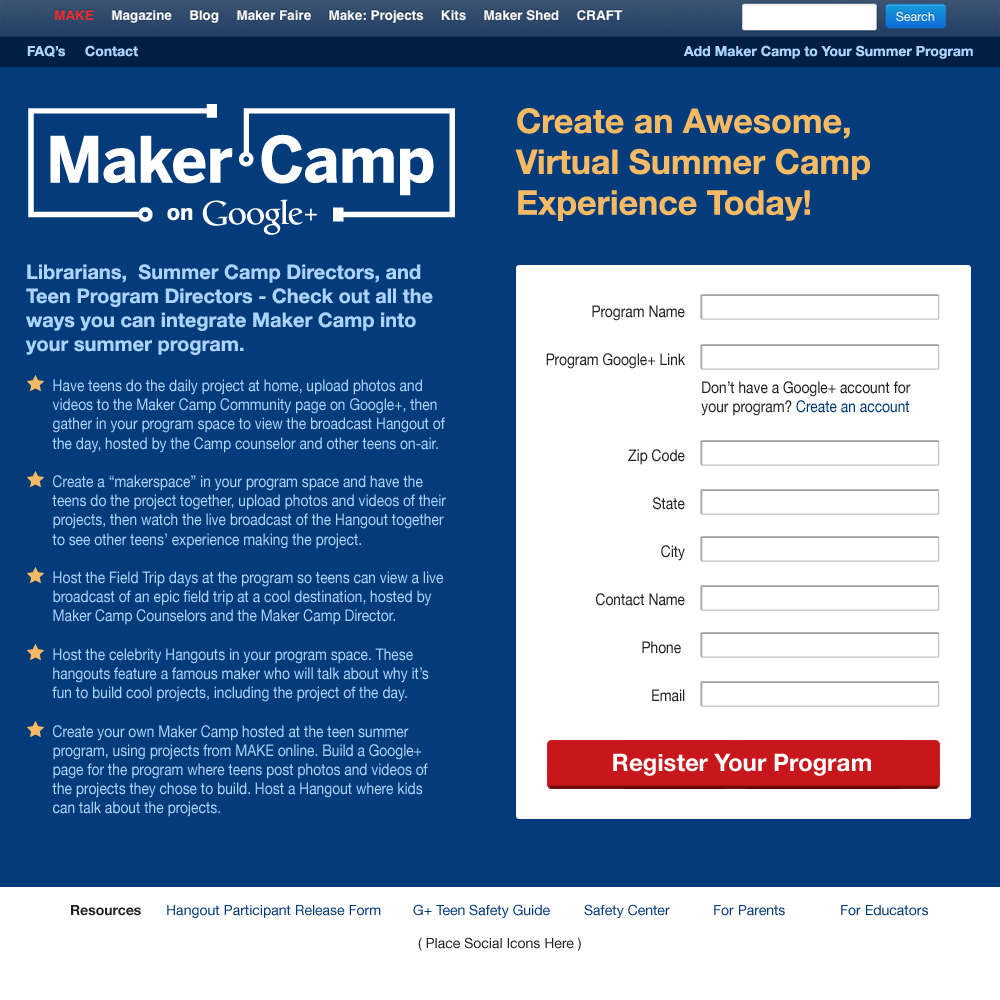
<style>
.page{position:relative;width:1000px;height:1000px;background:#043b7a}
.page>*{position:absolute;margin:0}
.t1{font:14px "HelveticaNeue-Bold";color:#acd3fc}
.t2{font:34px "HelveticaNeue-Bold";color:#f6ba65}
.t3{font:20px "HelveticaNeue-Bold";color:#acd3fc}
.t4{font:16px/24px "HelveticaNeue";color:#242424;scale:0.86 1}
.t5{font:16px "HelveticaNeue";color:#acd3fc;scale:0.86 1}
.t6{font:16px "HelveticaNeue";color:#242424;scale:0.86 1}
.t7{font:16px "HelveticaNeue";color:#043b7a;scale:0.86 1}
.t8{font:24px "HelveticaNeue-Bold";color:#ffffff}
.t9{font:14px "HelveticaNeue-Bold";color:#242424}
.t10{font:14px "HelveticaNeue";color:#043b7a}
.t11{font:14px "HelveticaNeue";color:#242424}
</style>
<div class="page">
<p class="t1" style="left:27px;top:45px;width:111px;height:12px">FAQ’s     Contact</p>
<p class="t1" style="left:683px;top:45px;width:290px;height:14px">Add Maker Camp to Your Summer Program</p>
<p class="t2" style="left:515px;top:108px;width:355px;height:113px;text-align:justify">Create an Awesome, <br>Virtual Summer Camp <br>Experience Today!</p>
<p class="t3" style="left:25px;top:264px;width:408px;height:91px;text-align:justify">Librarians,  Summer Camp Directors, and<br>Teen Program Directors - Check out all the <br>ways you can integrate Maker Camp into <br>your summer program.</p>
<p class="t4" style="left:546px;top:305px;width:139px;height:397px;text-align:right">Program Name<br><br>Program Google+ Link<br><br><br><br>Zip Code<br><br>State<br><br>City<br><br>Contact Name<br><br>Phone <br><br>Email</p>
<p class="t5" style="left:52px;top:379px;width:394px;height:438px">Have teens do the daily project at home, upload photos and videos to the Maker Camp Community page on Google+, then gather in your program space to view the broadcast Hangout of the day, hosted by the Camp counselor and other teens on-air.<br><br>Create a “makerspace” in your program space and have the teens do the project together, upload photos and videos of their projects, then watch the live broadcast of the Hangout together to see other teens’ experience making the project.<br><br>Host the Field Trip days at the program so teens can view a live broadcast of an epic field trip at a cool destination, hosted by Maker Camp Counselors and the Maker Camp Director.<br><br>Host the celebrity Hangouts in your program space. These hangouts feature a famous maker who will talk about why it’s fun to build cool projects, including the project of the day.<br><br>Create your own Maker Camp hosted at the teen summer program, using projects from MAKE online. Build a Google+ page for the program where teens post photos and videos of the projects they chose to build. Host a Hangout where kids can talk about the projects.</p>
<p class="t6" style="left:701px;top:381px;width:210px;height:35px">Don’t have a Google+ account for your program? <span class="t7">Create an account</span></p>
<p class="t8" style="left:613px;top:753px;width:258px;height:23px">Register Your Program</p>
<p class="t9" style="left:71px;top:905px;width:70px;height:11px">Resources</p>
<p class="t10" style="left:167px;top:905px;width:214px;height:13px">Hangout Participant Release Form</p>
<p class="t10" style="left:413px;top:904px;width:137px;height:14px">G+ Teen Safety Guide</p>
<p class="t10" style="left:584px;top:904px;width:86px;height:14px">Safety Center</p>
<p class="t10" style="left:714px;top:905px;width:71px;height:11px">For Parents</p>
<p class="t10" style="left:841px;top:905px;width:87px;height:11px">For Educators</p>
<p class="t11" style="left:418px;top:937px;width:163px;height:14px">( Place Social Icons Here )</p>
</div>
